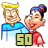
<style>
.page{position:relative;width:48px;height:48px;background:#ffffff}
.page>*{position:absolute;margin:0}
.t1{font:14px "04b19";color:#cad178}
</style>
<div class="page">
<p class="t1" style="left:16px;top:34px;width:16px;height:11px">50</p>
</div>
